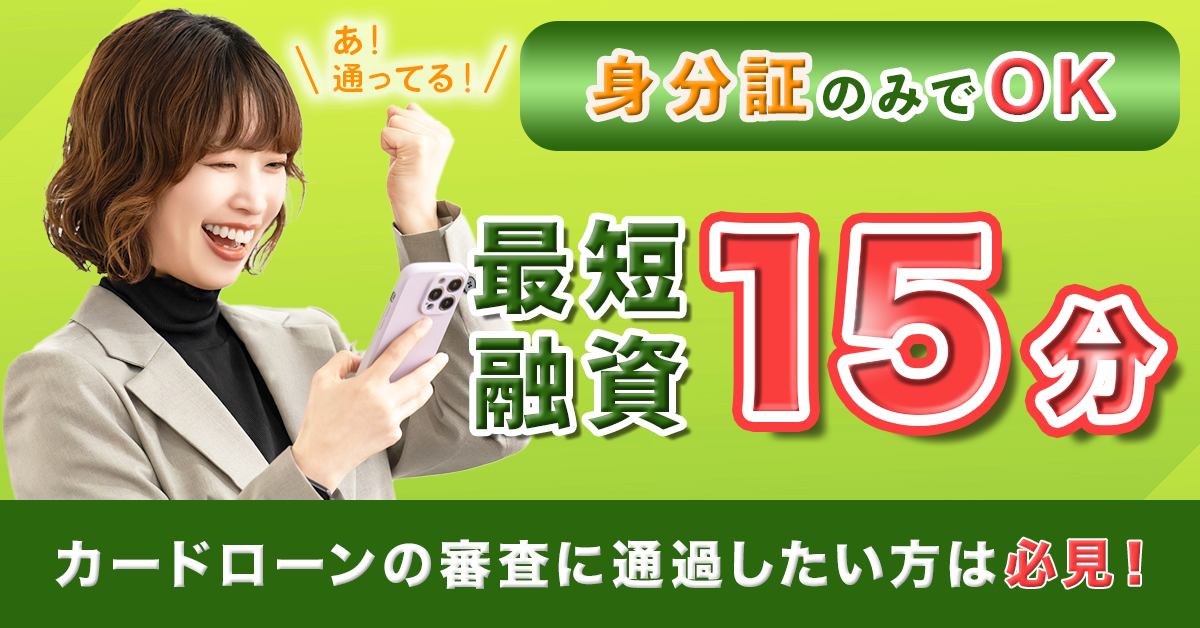
<style>
.page{position:relative;width:1200px;height:628px}
.page>*{position:absolute;margin:0}
.t1{font:32px "VDL-V7MaruGothic-Bold";letter-spacing:0.1em;color:#ff9100}
.t2{font:64px "ToppanBunkyuMidashiGothicStdN-ExtraBold";letter-spacing:0.2em}
.t3{font:76px "Arial-BoldMT";letter-spacing:0.12em}
.t4{font:48px "ToppanBunkyuMidashiGothicStdN-ExtraBold";letter-spacing:0.2em;color:#2b670d}
.t5{font:100px "HiraKakuStd-W8";letter-spacing:0.12em}
.t6{font:212px "HiraKakuStd-W8";letter-spacing:0.06em}
.t7{font:120px "HiraKakuStd-W8";letter-spacing:0.12em}
.t8{font:100px "SourceHanSansJP-Heavy";letter-spacing:0.12em}
.t9{font:52px "HiraKakuStd-W8";letter-spacing:0.12em;color:#ffffff}
.t10{font:52px "HiraKakuStd-W8";letter-spacing:0.12em}
</style>
<div class="page">
<p class="t1" style="left:333px;top:24px;width:137px;height:69px">あ！<br>通ってる！</p>
<p class="t2" style="left:592px;top:54px;width:215px;height:62px">身分証</p>
<p class="t3" style="left:991px;top:58px;width:119px;height:57px">OK</p>
<p class="t4" style="left:823px;top:74px;width:153px;height:42px">のみで</p>
<p class="t5" style="left:473px;top:219px;width:207px;height:96px">最短</p>
<p class="t6" style="left:720px;top:232px;width:271px;height:183px">15</p>
<p class="t7" style="left:1040px;top:304px;width:118px;height:114px">分</p>
<p class="t8" style="left:476px;top:334px;width:206px;height:96px">融資</p>
<p class="t9" style="left:55px;top:539px;width:941px;height:50px">カードローンの審査に通過したい方は</p>
<p class="t10" style="left:1006px;top:538px;width:135px;height:50px">必見！</p>
</div>
